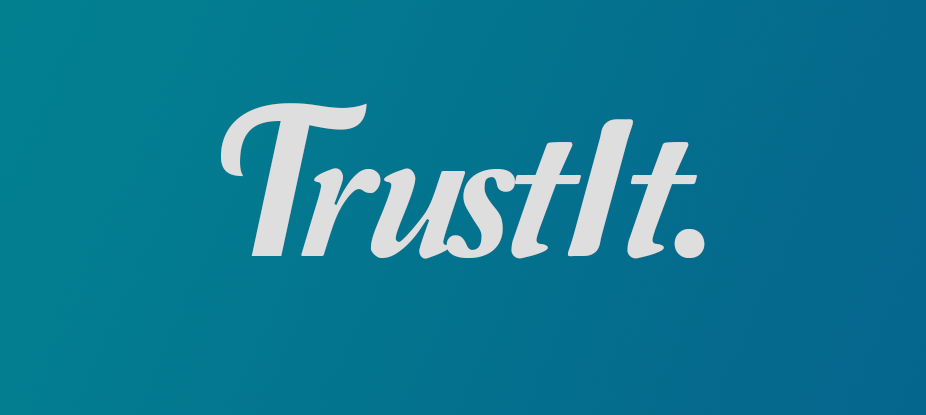
<style>
.page{position:relative;width:926px;height:415px}
.page>*{position:absolute;margin:0}
.t1{font:204px "Lobster1.4";color:#dedede}
.t2{font:204px "Amperzand";letter-spacing:-0.05em;color:#dedede}
</style>
<div class="page">
<p class="t1" style="left:221px;top:103px;width:146px;height:153px">T</p>
<p class="t2" style="left:301px;top:119px;width:404px;height:140px">rustIt.</p>
</div>
